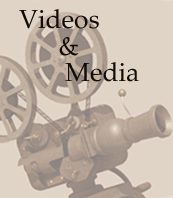
<style>
.page{position:relative;width:173px;height:198px;background:#e0d4c7}
.page>*{position:absolute;margin:0}
.t1{font:26.3px/13.2px "PalatinoLinotype-Roman";color:#120c06}
</style>
<div class="page">
<p class="t1" style="left:19px;top:9px;width:120px;height:73px">Videos <br>   <br>        &amp; <br>           <br>         Media</p>
</div>
